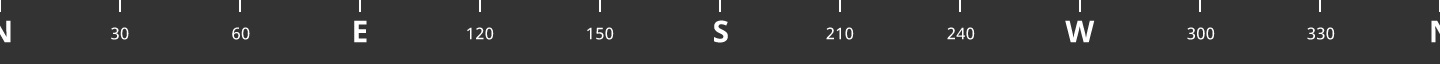
<style>
.page{position:relative;width:1440px;height:64px;background:#333333}
.page>*{position:absolute;margin:0}
.t1{font:16px "OpenSans-Medium";letter-spacing:0.02em;color:#ffffff}
.t2{font:30px "OpenSans-Bold";letter-spacing:0.02em;color:#ffffff}
</style>
<div class="page">
<p class="t1" style="left:111px;top:27px;width:18px;height:13px">30</p>
<p class="t1" style="left:232px;top:27px;width:18px;height:13px">60</p>
<p class="t2" style="left:354px;top:20px;width:13px;height:23px">E</p>
<p class="t1" style="left:467px;top:27px;width:27px;height:13px">120</p>
<p class="t1" style="left:587px;top:27px;width:27px;height:13px">150</p>
<p class="t2" style="left:714px;top:20px;width:14px;height:23px">S</p>
<p class="t1" style="left:826px;top:27px;width:28px;height:13px">210</p>
<p class="t1" style="left:947px;top:27px;width:28px;height:13px">240</p>
<p class="t2" style="left:1065px;top:20px;width:30px;height:23px">W</p>
<p class="t1" style="left:1187px;top:27px;width:28px;height:13px">300</p>
<p class="t1" style="left:1307px;top:27px;width:28px;height:13px">330</p>
</div>
